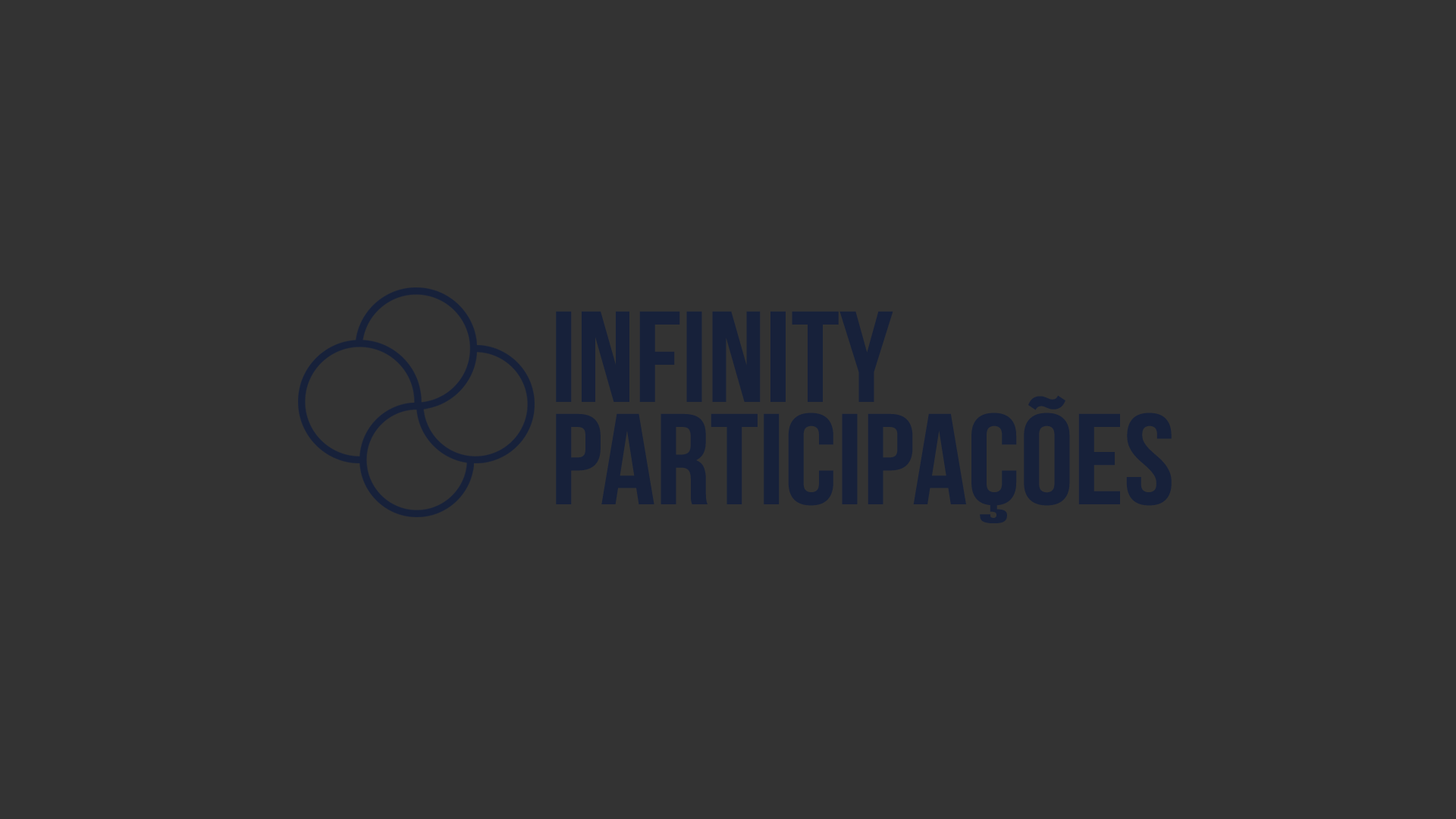
<style>
.page{position:relative;width:1456px;height:819px;background:#333333}
.page>*{position:absolute;margin:0}
.t1{font:128.9px/102.4px "BebasNeueBold";color:#17213a;scale:1.05 1}
</style>
<div class="page">
<p class="t1" style="left:556px;top:311px;width:616px;height:212px">infinity<br>participações</p>
</div>
